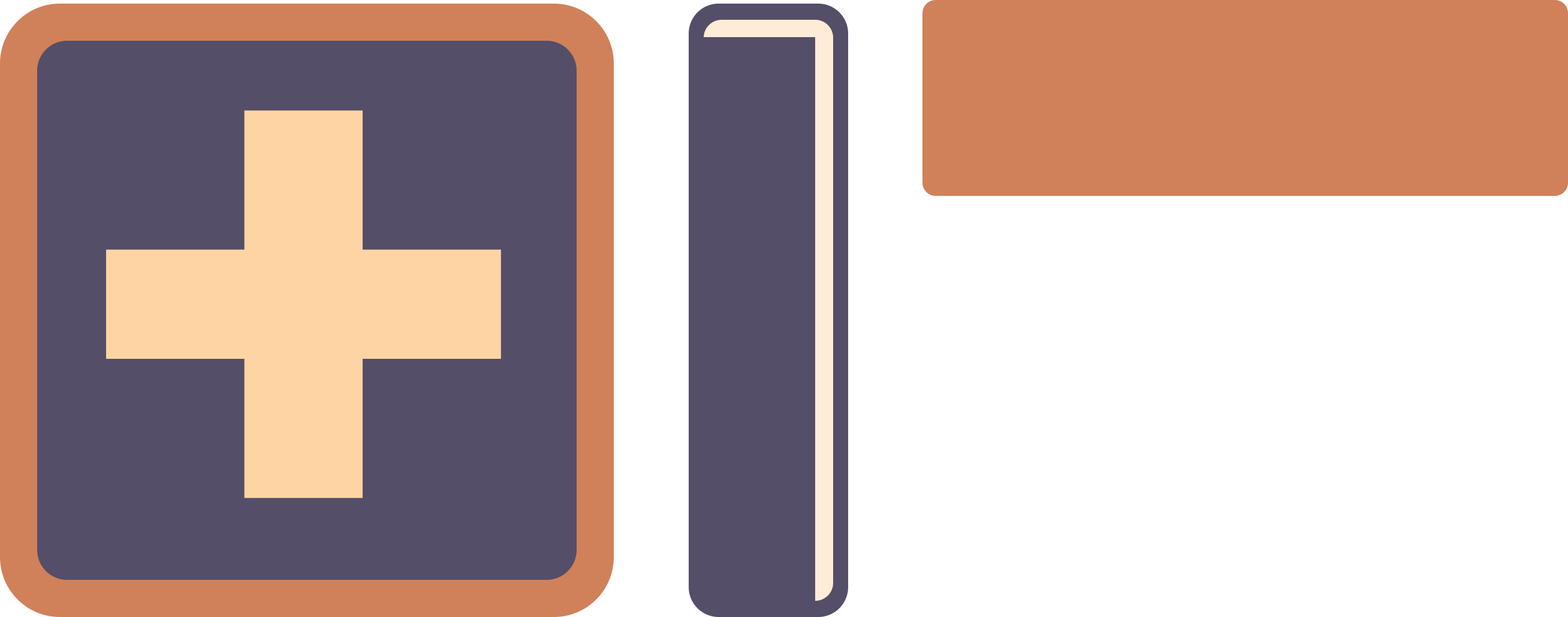
<style>
.page{position:relative;width:1568px;height:617px;background:#ffffff}
.page>*{position:absolute;margin:0}
.t1{font:909.8px "FuturaPT-ExtraBold";color:#ffd4a3}
</style>
<div class="page">
<p class="t1" style="left:106px;top:110px;width:395px;height:389px">+</p>
</div>
